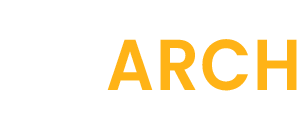
<style>
.page{position:relative;width:300px;height:122px;background:#ffffff}
.page>*{position:absolute;margin:0}
.t1{font:72px "Poppins-SemiBold";letter-spacing:0.025em;color:#ffb316;scale:0.93 1}
</style>
<div class="page">
<p class="t1" style="left:107px;top:39px;width:190px;height:52px">ARCH</p>
</div>
